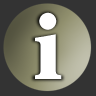
<style>
.page{position:relative;width:96px;height:96px;background:#333333}
.page>*{position:absolute;margin:0}
.t1{font:97px "MinionStd-Black";color:#ffffff}
</style>
<div class="page">
<p class="t1" style="left:35px;top:12px;width:27px;height:67px">i</p>
</div>
